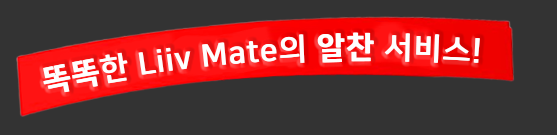
<style>
.page{position:relative;width:557px;height:135px;background:#333333}
.page>*{position:absolute;margin:0}
.t1{font:30.6px "NanumSquareB";letter-spacing:0.05em;color:#fefefe}
.t2{font:30.6px "NanumSquareEB";letter-spacing:0.05em;color:#fefefe}
</style>
<div class="page">
<p class="t1" style="left:43px;top:32px;width:436px;height:61px;rotate:-4deg"><span class="t2">똑똑</span>한 Liiv Mate의 <span class="t2">알찬</span> 서비스!</p>
<p class="t1" style="left:44px;top:32px;width:436px;height:61px;rotate:-4deg"><span class="t2">똑똑</span>한 Liiv Mate의 <span class="t2">알찬</span> 서비스!</p>
</div>
